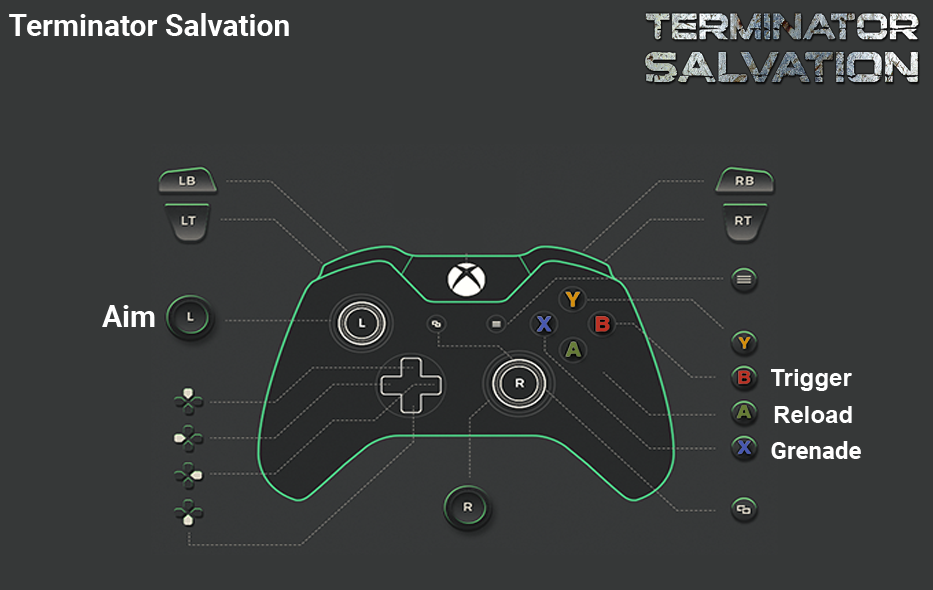
<style>
.page{position:relative;width:933px;height:590px;background:#363838}
.page>*{position:absolute;margin:0}
.t1{font:30px "Roboto-Bold";color:#ffffff}
.t2{font:30px "Roboto-Bold";color:#fefefe}
.t3{font:24px "Arial-BoldMT";color:#fefefe}
.t4{font:24px "Roboto-Bold";color:#ffffff}
</style>
<div class="page">
<p class="t1" style="left:9px;top:13px;width:280px;height:23px">Terminator Salvation</p>
<p class="t2" style="left:102px;top:305px;width:53px;height:22px">Aim</p>
<p class="t3" style="left:771px;top:369px;width:81px;height:22px">Trigger</p>
<p class="t3" style="left:774px;top:406px;width:78px;height:17px">Reload</p>
<p class="t4" style="left:771px;top:441px;width:90px;height:18px">Grenade</p>
</div>
